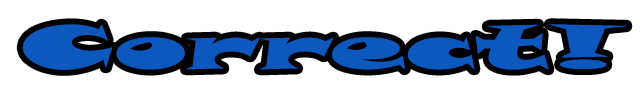
<style>
.page{position:relative;width:640px;height:93px;background:#ffffff}
.page>*{position:absolute;margin:0}
.t1{font:60px "SnapITC-Regular";color:#0d58be;scale:2 1}
</style>
<div class="page">
<p class="t1" style="left:22px;top:24px;width:605px;height:46px">Correct!</p>
</div>
